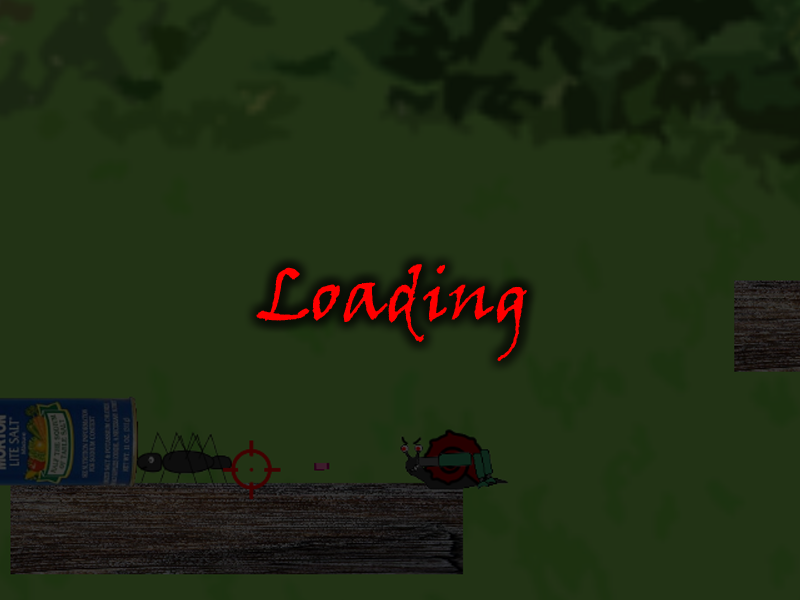
<style>
.page{position:relative;width:800px;height:600px;background:#223315}
.page>*{position:absolute;margin:0}
.t1{font:72px "VinerHandITC";color:#ff0000}
</style>
<div class="page">
<p class="t1" style="left:256px;top:264px;width:271px;height:98px">Loading</p>
</div>
